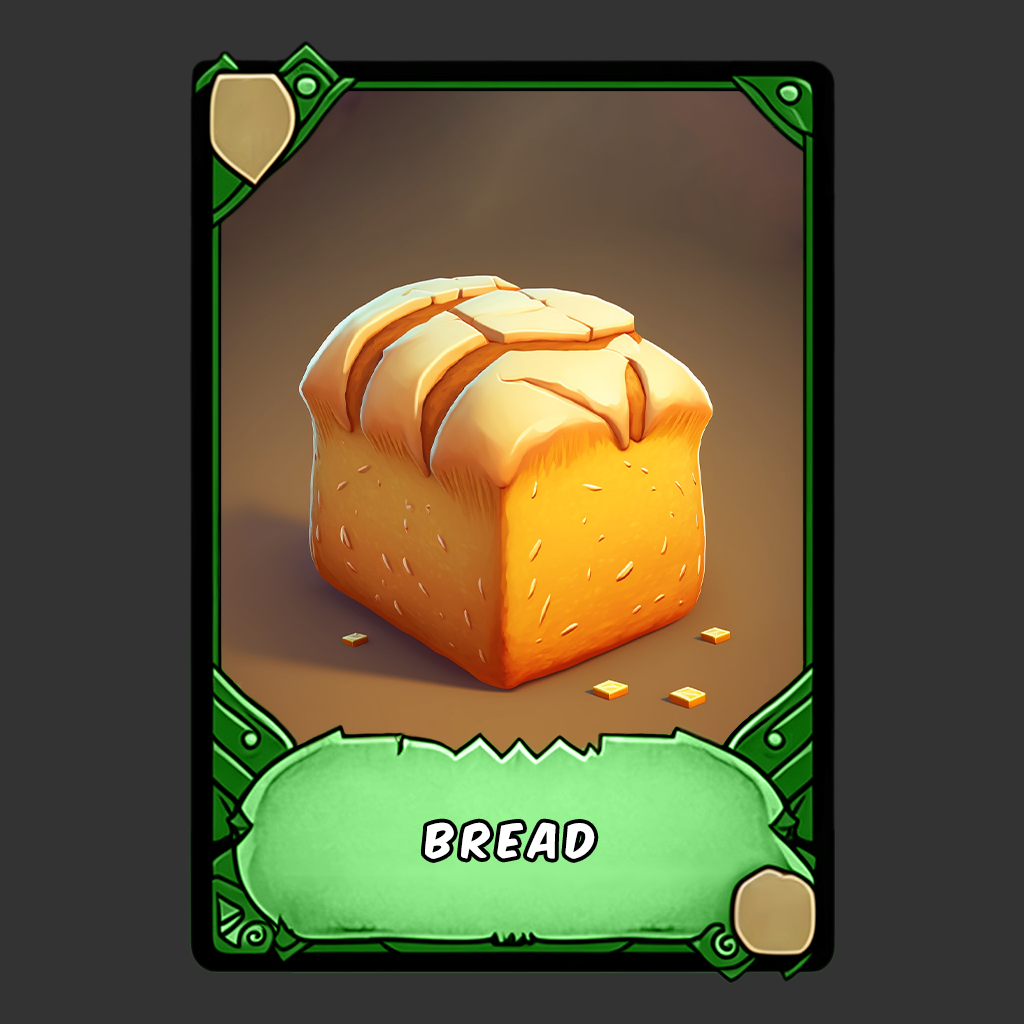
<style>
.page{position:relative;width:1024px;height:1024px;background:#333333}
.page>*{position:absolute;margin:0}
.t1{font:40px "KomikaAxis";letter-spacing:0.2em;color:#ffffff}
</style>
<div class="page">
<p class="t1" style="left:425px;top:822px;width:170px;height:37px">bread</p>
</div>
